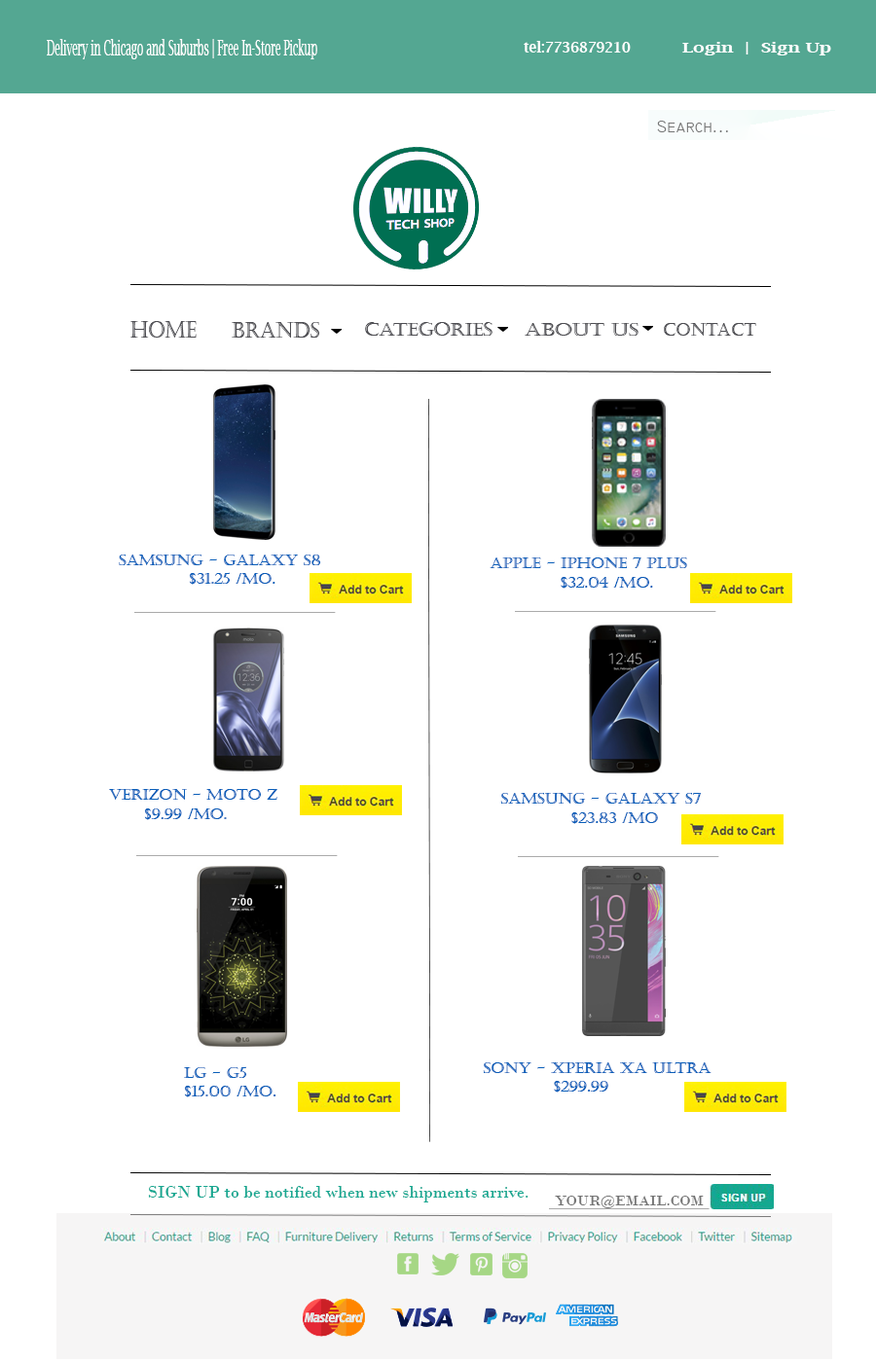
<style>
.page{position:relative;width:876px;height:1362px;background:#ffffff}
.page>*{position:absolute;margin:0}
.t1{font:21.8px "LucidaBright";color:#ffffff;scale:0.47 1}
.t2{font:14.5px "LucidaBright-Demi";color:#ffffff;scale:0.95 1}
.t3{font:13.9px "LucidaBright-Demi";color:#ffffff;scale:1.32 1}
.t4{font:11.2px "LucidaBright-Demi";color:#ffffff;scale:1.32 1}
.t5{font:17.5px "Technic";color:#757575}
.t6{font:23.1px "Castellar";color:#4e4e53;scale:0.84 1}
.t7{font:22.3px "Castellar";color:#4e4e53;scale:0.88 1}
.t8{font:18.8px "Castellar";color:#4e4e53}
.t9{font:17.1px "Castellar";color:#4e4e53;scale:1.18 1}
.t10{font:17.1px "Castellar";color:#4e4e53}
.t11{font:15.4px "Castellar";color:#085eb9}
.t12{font:15.6px "Castellar";color:#085eb9}
.t13{font:17.5px "BodoniMT";color:#16a791}
.t14{font:15px "BodoniMT";color:#757575;scale:1.04 1}
</style>
<div class="page">
<p class="t1" style="left:47px;top:39px;width:270px;height:20px">Delivery in Chicago and Suburbs | Free In-Store Pickup</p>
<p class="t2" style="left:523px;top:41px;width:107px;height:12px">tel:7736879210</p>
<p class="t3" style="left:682px;top:42px;width:149px;height:13px"><span class="t4"><br></span>Login  |  Sign Up</p>
<p class="t5" style="left:657px;top:121px;width:71px;height:11px">Search...</p>
<p class="t6" style="left:130px;top:321px;width:67px;height:17px">HOME</p>
<p class="t7" style="left:232px;top:322px;width:87px;height:16px">BRANDS</p>
<p class="t8" style="left:365px;top:322px;width:127px;height:14px">cATEGORIES</p>
<p class="t9" style="left:524px;top:323px;width:114px;height:13px">ABOUT US</p>
<p class="t10" style="left:663px;top:323px;width:93px;height:13px">CONTACT</p>
<p class="t11" style="left:119px;top:555px;width:201px;height:30px">Samsung - Galaxy S8<br>  $31.25 /mo.</p>
<p class="t12" style="left:489px;top:557px;width:198px;height:32px">Apple - iPhone 7 Plus<br>  $32.04 /mo.</p>
<p class="t12" style="left:109px;top:789px;width:168px;height:31px">Verizon - Moto Z <br> $9.99 /mo.</p>
<p class="t12" style="left:500px;top:793px;width:201px;height:31px">Samsung - Galaxy S7 <br>  $23.83 /mo</p>
<p class="t12" style="left:184px;top:1066px;width:92px;height:31px">LG - G5<br>  $15.00 /mo.</p>
<p class="t12" style="left:483px;top:1062px;width:228px;height:30px">Sony - XPERIA XA Ultra <br>  $299.99</p>
<p class="t13" style="left:148px;top:1186px;width:380px;height:16px">SIGN UP to be notified when new shipments arrive.</p>
<p class="t14" style="left:555px;top:1196px;width:148px;height:12px">YOUR@EMAIL.COM</p>
</div>
